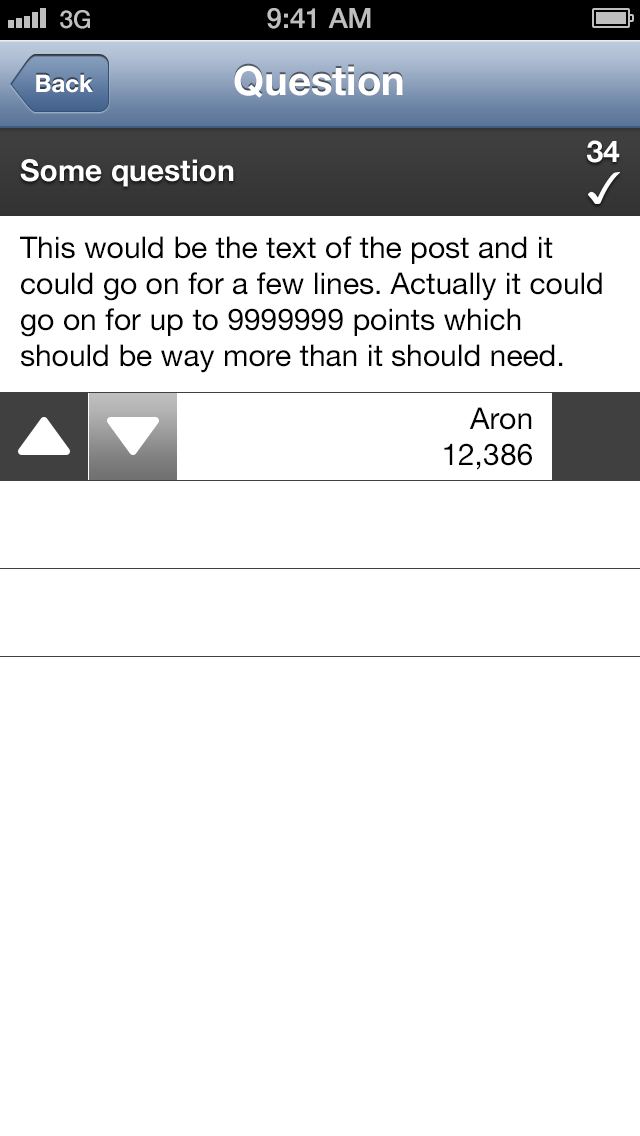
<style>
.page{position:relative;width:640px;height:1136px;background:#ffffff}
.page>*{position:absolute;margin:0}
.t1{font:24.5px "HelveticaNeue-Medium";color:#bfbfbf}
.t2{font:28.1px "HelveticaNeue-Medium";color:#bfbfbf}
.t3{font:40px "HelveticaNeue-Bold";color:#ffffff}
.t4{font:24px "HelveticaNeue-Bold";color:#ffffff}
.t5{font:30px "HelveticaNeue-Bold";color:#ffffff}
.t6{font:30px "HelveticaNeue";color:#000000}
</style>
<div class="page">
<p class="t1" style="left:60px;top:10px;width:30px;height:19px">3G</p>
<p class="t2" style="left:267px;top:8px;width:104px;height:21px">9:41 AM</p>
<p class="t3" style="left:234px;top:65px;width:169px;height:33px">Question</p>
<p class="t4" style="left:36px;top:74px;width:57px;height:19px">Back</p>
<p class="t5" style="left:587px;top:140px;width:33px;height:23px">34</p>
<p class="t5" style="left:20px;top:159px;width:214px;height:28px">Some question</p>
<p class="t6" style="left:20px;top:236px;width:582px;height:137px">This would be the text of the post and it could go on for a few lines. Actually it could go on for up to 9999999 points which should be way more than it should need.</p>
<p class="t6" style="left:469px;top:407px;width:63px;height:23px">Aron</p>
<p class="t6" style="left:444px;top:443px;width:88px;height:27px">12,386</p>
</div>
